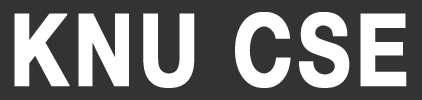
<style>
.page{position:relative;width:422px;height:100px;background:#333333}
.page>*{position:absolute;margin:0}
.t1{font:100px "Helvetica75-Bold";letter-spacing:0.05em;color:#ffffff;font-weight:bold;scale:0.8 1}
</style>
<div class="page">
<p class="t1" style="left:14px;top:12px;width:393px;height:76px">KNU CSE</p>
</div>
